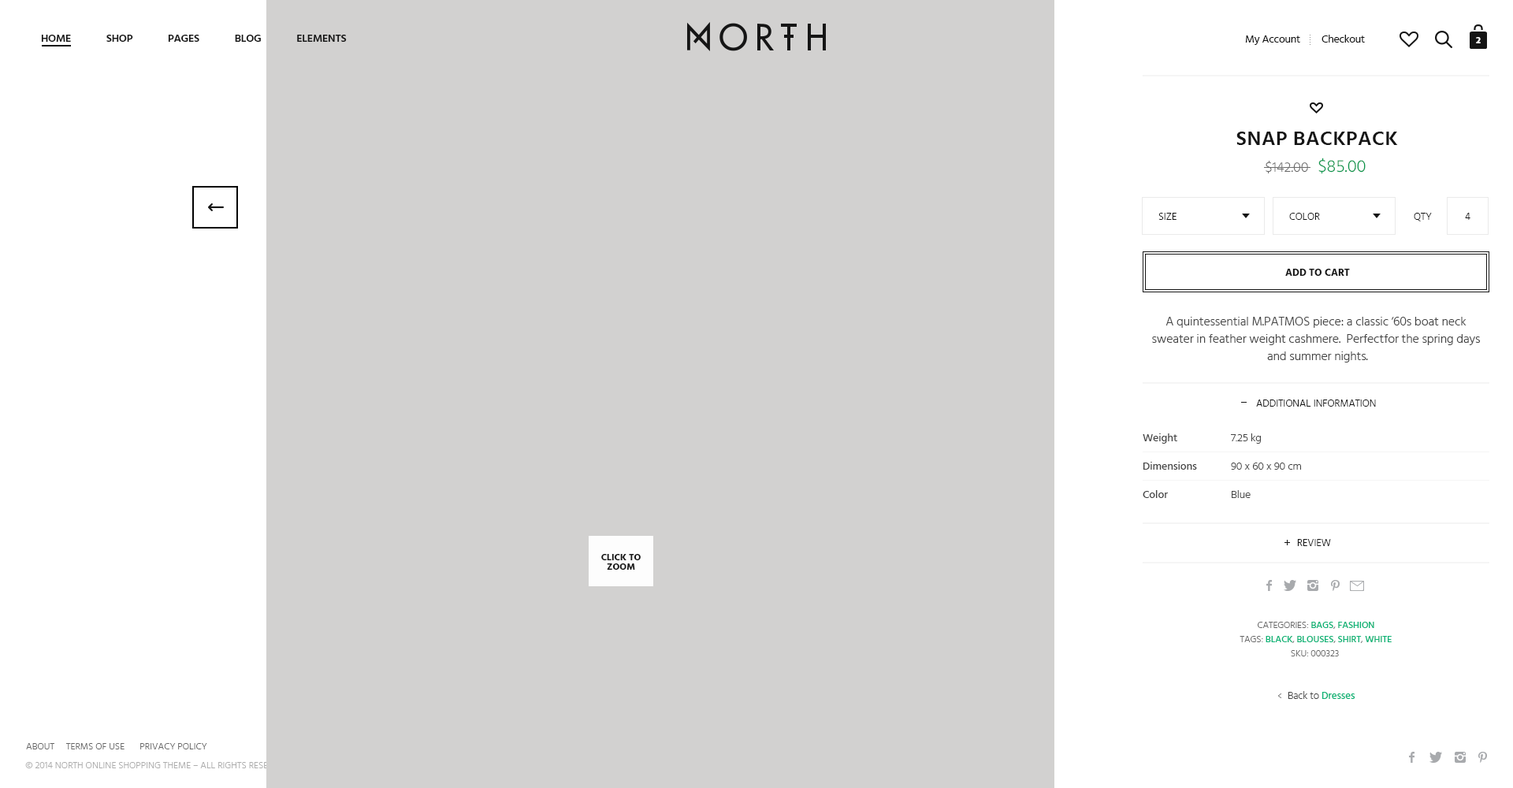
<style>
.page{position:relative;width:1513px;height:788px;background:#d2d1d0}
.page>*{position:absolute;margin:0}
.t1{font:11px "Hind-Semibold";letter-spacing:-0.02em;color:#141414;text-transform:uppercase}
.t2{font:11px "Hind-Regular";letter-spacing:-0.02em;color:#141414}
.t3{font:8.7px "ArialMT";color:#919191}
.t4{font:9.5px "Hind-Bold";letter-spacing:-0.02em;color:#ffffff;text-transform:uppercase}
.t5{font:20.5px "Hind-Semibold";letter-spacing:0.02em;color:#151515;text-transform:uppercase}
.t6{font:14.2px "Hind-Light";color:#676767;text-transform:uppercase}
.t7{font:17.3px "Hind-Light";color:#0b974d;text-transform:uppercase}
.t8{font:10.2px "Hind-Light";color:#151515;text-transform:uppercase}
.t9{font:10.2px "Hind-Bold";color:#151515;text-transform:uppercase}
.t10{font:12.6px/17.3px "Hind-Light";letter-spacing:-0.01em;color:#454545}
.t11{font:11px/28.4px "Hind-Medium";letter-spacing:-0.01em;color:#454545}
.t12{font:11px/28.4px "Hind-Light";letter-spacing:-0.01em;color:#454545}
.t13{font:9.5px/9.5px "Hind-Bold";color:#151515;text-transform:uppercase}
.t14{font:9.5px/14.2px "Hind-Light";letter-spacing:-0.01em;color:#676767;text-transform:uppercase}
.t15{font:9.5px/14.2px "Hind-Medium";letter-spacing:-0.01em;color:#0eb477;text-transform:uppercase}
.t16{font:10.2px "Hind-Light";letter-spacing:-0.01em;color:#454545}
.t17{font:10.2px "Hind-Medium";letter-spacing:-0.01em;color:#0eb477}
.t18{font:9.5px "Hind-Light";color:#666666;text-transform:uppercase}
.t19{font:9.5px "Hind-Light";color:#adadad;text-transform:uppercase}
</style>
<div class="page">
<p class="t1" style="left:41px;top:35px;width:306px;height:7px">HOME              SHOP              PAGES              BLOG              ELEMENTS</p>
<p class="t2" style="left:1245px;top:35px;width:55px;height:10px">My Account</p>
<p class="t3" style="left:1310px;top:35px;width:1px;height:10px;rotate:-90deg">.....</p>
<p class="t2" style="left:1322px;top:35px;width:43px;height:8px">Checkout</p>
<p class="t4" style="left:1476px;top:37px;width:5px;height:6px">2</p>
<p class="t5" style="left:1236px;top:132px;width:162px;height:13px">Snap Backpack</p>
<p class="t6" style="left:1266px;top:161px;width:42px;height:12px">$142.00</p>
<p class="t7" style="left:1318px;top:158px;width:48px;height:16px">$85.00</p>
<p class="t8" style="left:1158px;top:213px;width:19px;height:7px">SIZe</p>
<p class="t8" style="left:1289px;top:213px;width:31px;height:7px">COLOR</p>
<p class="t8" style="left:1414px;top:213px;width:18px;height:8px">QTY</p>
<p class="t8" style="left:1465px;top:213px;width:6px;height:7px">4</p>
<p class="t9" style="left:1285px;top:269px;width:65px;height:7px">ADD TO CART</p>
<p class="t10" style="left:1152px;top:317px;width:329px;height:46px;text-align:center">A quintessential M.PATMOS piece: a classic ‘60s boat neck <br>sweater in feather weight cashmere.  Perfectfor the spring days <br>and summer nights.</p>
<p class="t8" style="left:1256px;top:400px;width:120px;height:7px">ADDITIONAL INFORMATION</p>
<p class="t11" style="left:1143px;top:433px;width:54px;height:65px">Weight<br>Dimensions<br>Color</p>
<p class="t12" style="left:1231px;top:433px;width:70px;height:65px">7.25 kg<br>90 x 60 x 90 cm<br>Blue</p>
<p class="t8" style="left:1297px;top:539px;width:34px;height:7px">REVIEW</p>
<p class="t13" style="left:601px;top:554px;width:40px;height:16px;text-align:center">CLICK TO<br>ZOOM</p>
<p class="t14" style="left:1240px;top:622px;width:152px;height:34px;text-align:center">Categories: <span class="t15">BAGS</span>, <span class="t15">FASHION<br></span>Tags: <span class="t15">black</span>, <span class="t15">Blouses</span>, <span class="t15">SHIRT</span>, <span class="t15">WHITE<br></span>SKU: 000323</p>
<p class="t16" style="left:1288px;top:691px;width:67px;height:8px">Back to <span class="t17">Dresses</span></p>
<p class="t18" style="left:26px;top:743px;width:28px;height:6px">ABOUT</p>
<p class="t18" style="left:66px;top:743px;width:59px;height:6px">TERMS OF USE</p>
<p class="t18" style="left:140px;top:743px;width:67px;height:6px">PRIVACY POLICY</p>
<p class="t19" style="left:25px;top:762px;width:265px;height:6px">© 2014 NORTH ONLINE SHOPPING THEME – All Rights Reserved</p>
</div>
